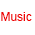
<style>
.page{position:relative;width:35px;height:35px;background:#ffffff}
.page>*{position:absolute;margin:0}
.t1{font:12px "ArialMT";color:#ef0101}
</style>
<div class="page">
<p class="t1" style="left:1px;top:12px;width:31px;height:9px">Music</p>
</div>
